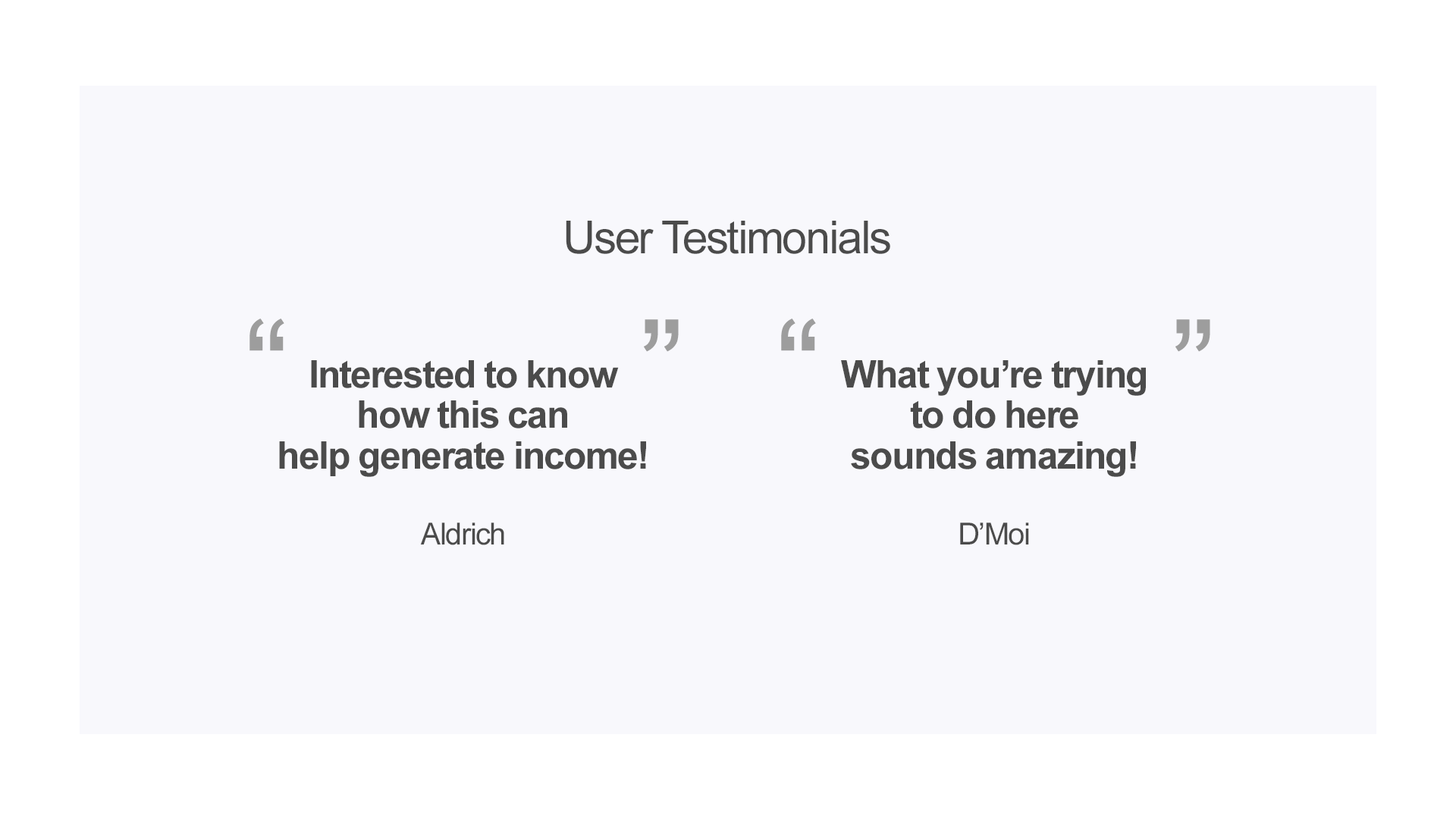
<style>
.page{position:relative;width:1456px;height:819px;background:#f8f8fc}
.page>*{position:absolute;margin:0}
.t1{font:45.5px "ArialMT";letter-spacing:-0.04em;color:#4b4b4b}
.t2{font:136px "ArialMT";letter-spacing:-0.04em;color:#9d9d9d}
.t3{font:38.1px/40.4px "Arial-BoldMT";letter-spacing:-0.04em;color:#4b4b4b}
.t4{font:30.3px "ArialMT";letter-spacing:-0.04em;color:#4b4b4b}
</style>
<div class="page">
<p class="t1" style="left:566px;top:221px;width:324px;height:33px">User Testimonials</p>
<p class="t2" style="left:249px;top:318px;width:430px;height:34px">“           ”</p>
<p class="t2" style="left:781px;top:318px;width:429px;height:34px">“           ”</p>
<p class="t3" style="left:279px;top:360px;width:367px;height:117px;text-align:center">Interested to know<br>how this can<br>help generate income!</p>
<p class="t3" style="left:841px;top:360px;width:305px;height:117px;text-align:center">What you’re trying<br>to do here<br>sounds amazing!</p>
<p class="t4" style="left:420px;top:522px;width:84px;height:23px">Aldrich</p>
<p class="t4" style="left:960px;top:522px;width:69px;height:23px">D’Moi</p>
</div>
